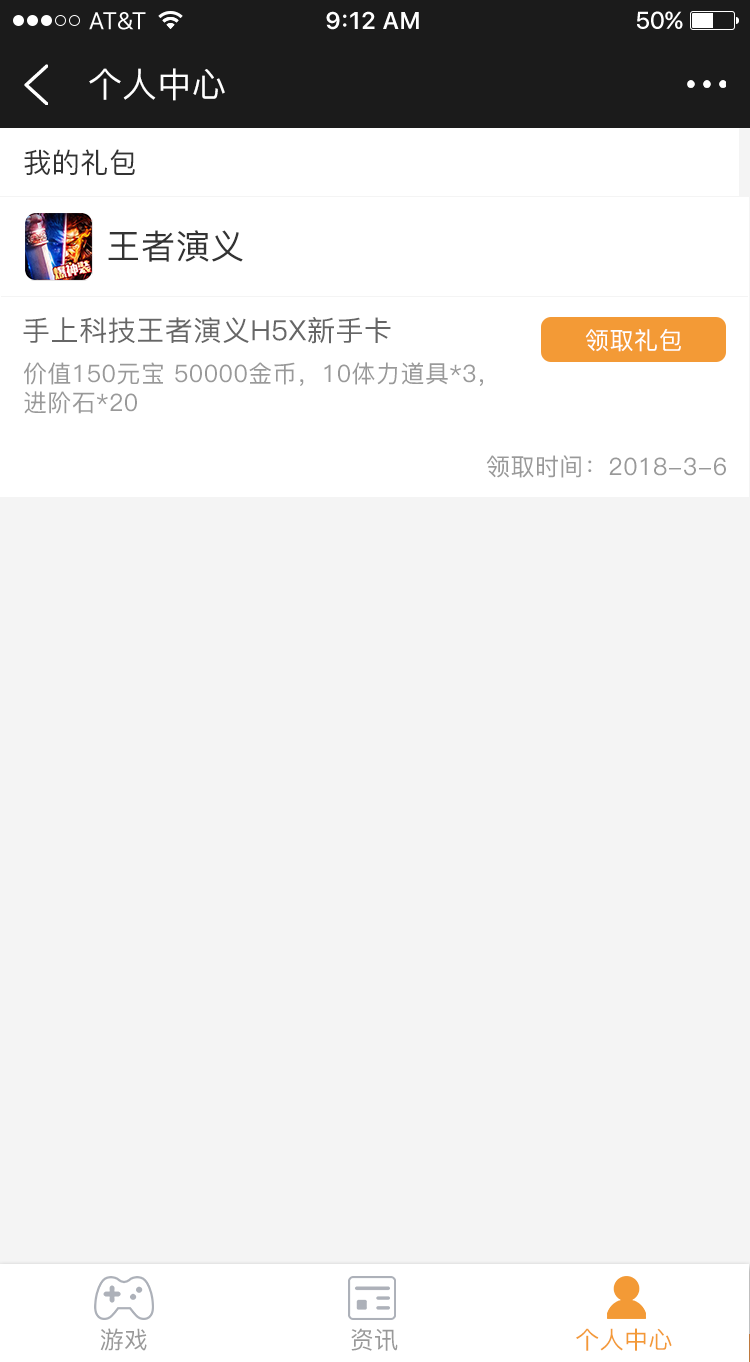
<style>
.page{position:relative;width:750px;height:1362px;background:#f4f4f4}
.page>*{position:absolute;margin:0}
.t1{font:34px "PingFang-SC-Medium";letter-spacing:0.02em;color:#ffffff}
.t2{font:28px "PingFang-SC-Medium";letter-spacing:0.02em;color:#333333}
.t3{font:34px "PingFang-SC-Medium";letter-spacing:0.02em;color:#333333}
.t4{font:28px "PingFang-SC-Medium";letter-spacing:0.02em;color:#666666}
.t5{font:24px "PingFang-SC-Medium";letter-spacing:0.02em;color:#ffffff}
.t6{font:24px "PingFang-SC-Medium";letter-spacing:0.02em;color:#999999}
.t7{font:24px "PingFang-SC-Medium";letter-spacing:0.02em;color:#f39a36}
</style>
<div class="page">
<p class="t1" style="left:89px;top:68px;width:136px;height:33px">个人中心</p>
<p class="t2" style="left:24px;top:149px;width:111px;height:27px">我的礼包</p>
<p class="t3" style="left:108px;top:230px;width:135px;height:32px">王者演义</p>
<p class="t4" style="left:23px;top:317px;width:368px;height:27px">手上科技王者演义H5X新手卡</p>
<p class="t5" style="left:585px;top:329px;width:96px;height:23px">领取礼包</p>
<p class="t6" style="left:24px;top:362px;width:459px;height:52px">价值150元宝 50000金币，10体力道具*3，<br>进阶石*20</p>
<p class="t6" style="left:486px;top:455px;width:240px;height:23px">领取时间：2018-3-6</p>
<p class="t6" style="left:100px;top:1328px;width:47px;height:23px">游戏</p>
<p class="t6" style="left:351px;top:1328px;width:47px;height:23px">资讯</p>
<p class="t7" style="left:576px;top:1328px;width:96px;height:23px">个人中心</p>
</div>
